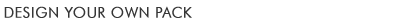
<style>
.page{position:relative;width:400px;height:24px;background:#ffffff}
.page>*{position:absolute;margin:0}
.t1{font:14.7px "FuturaBT-Light";letter-spacing:0.025em;color:#363636;text-transform:uppercase;font-weight:bold}
</style>
<div class="page">
<p class="t1" style="left:4px;top:6px;width:188px;height:12px">DESIGN YOUR OWN PACK</p>
</div>
